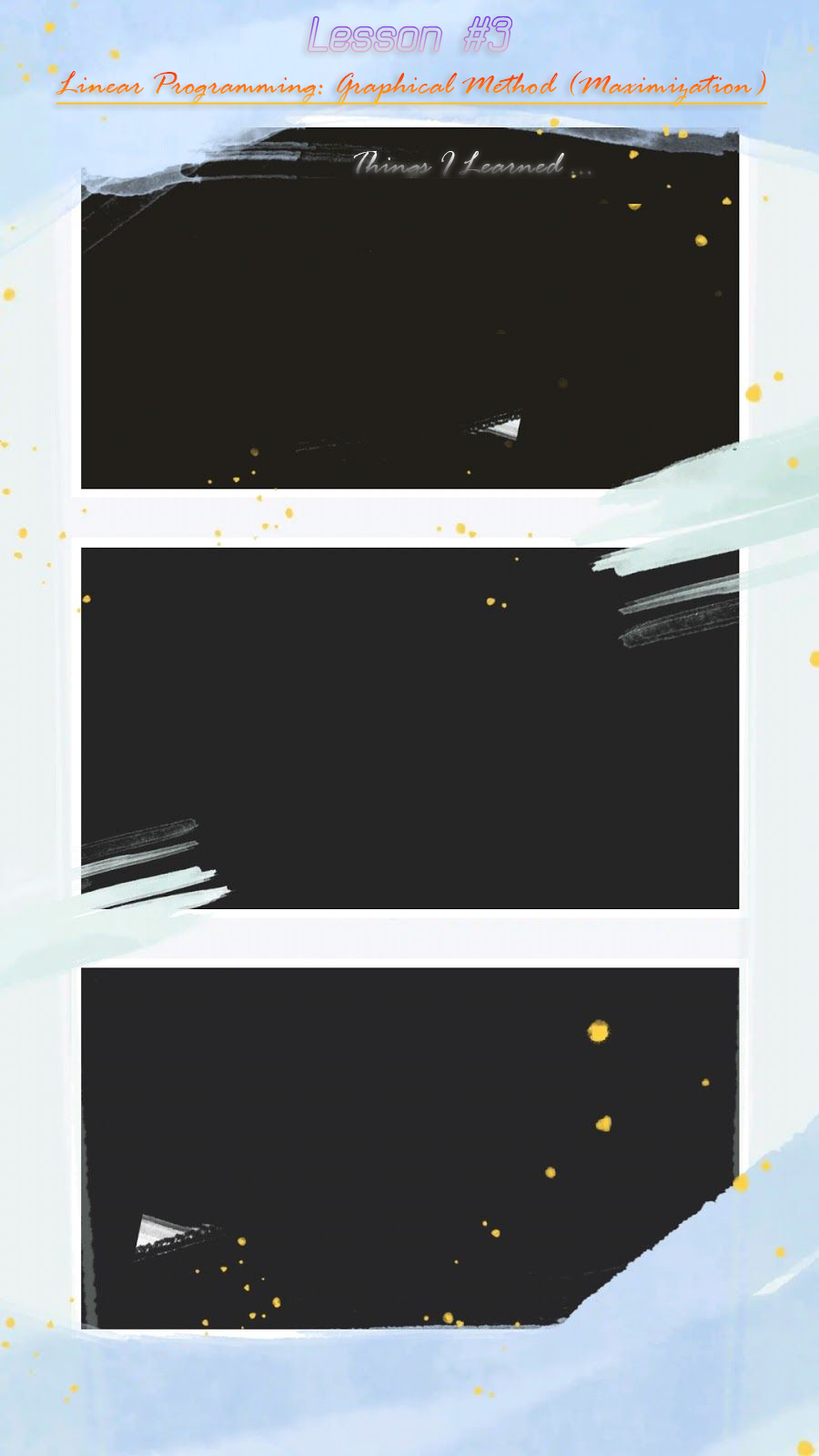
<style>
.page{position:relative;width:819px;height:1456px}
.page>*{position:absolute;margin:0}
.t1{font:33.7px "RageItalic";text-decoration:underline}
</style>
<div class="page">
<p class="t1" style="left:56px;top:71px;width:712px;height:35px">Linear Programming: Graphical Method (Maximization)</p>
<p class="t1" style="left:349px;top:151px;width:246px;height:34px">Things I Learned ...</p>
</div>
